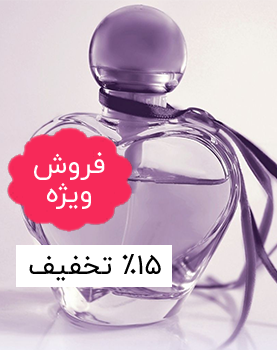
<style>
.page{position:relative;width:277px;height:350px}
.page>*{position:absolute;margin:0}
.t1{font:28px/29px "IRANYekan";color:#ffffff}
.t2{font:28px "IRANYekan";color:#000000}
</style>
<div class="page">
<p class="t1" style="left:34px;top:152px;width:71px;height:57px;text-align:center">فروش<br>ویژه</p>
<p class="t2" style="left:29px;top:254px;width:132px;height:27px">15% تخفیف</p>
</div>
